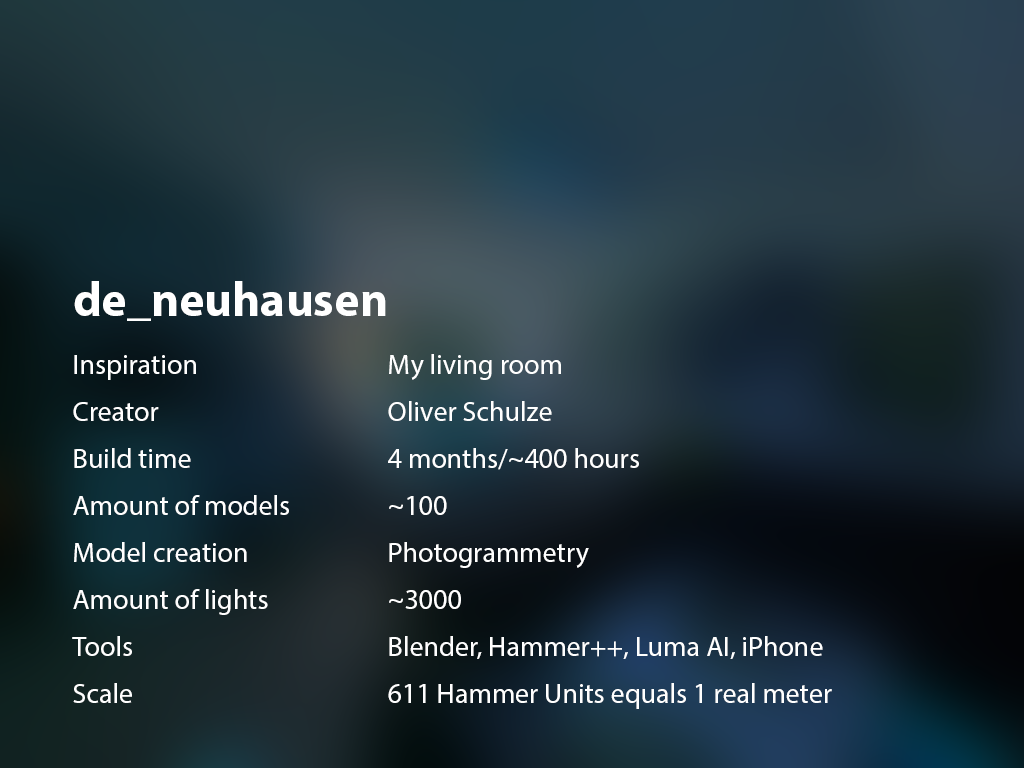
<style>
.page{position:relative;width:1024px;height:768px}
.page>*{position:absolute;margin:0}
.t1{font:48px "MyriadPro-Bold";color:#ffffff}
.t2{font:28px/47px "MyriadPro-Regular";color:#ffffff}
</style>
<div class="page">
<p class="t1" style="left:74px;top:281px;width:312px;height:40px">de_neuhausen</p>
<p class="t2" style="left:72px;top:355px;width:217px;height:348px">Inspiration<br>Creator<br>Build time<br>Amount of models<br>Model creation<br>Amount of lights<br>Tools<br>Scale</p>
<p class="t2" style="left:388px;top:354px;width:444px;height:355px">My living room<br>Oliver Schulze<br>4 months/~400 hours<br>~100<br>Photogrammetry<br>~3000<br>Blender, Hammer++, Luma AI, iPhone<br>611 Hammer Units equals 1 real meter</p>
</div>
